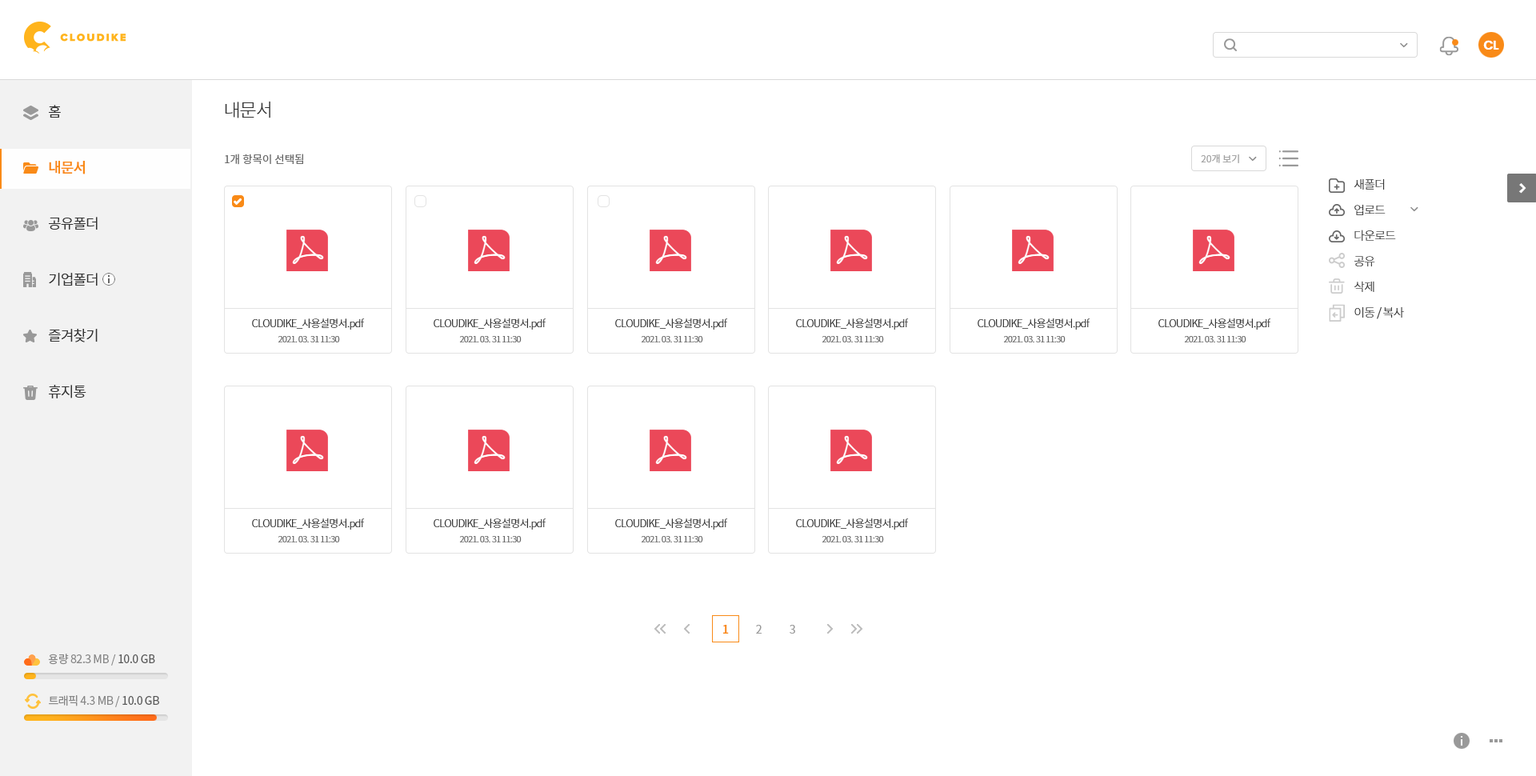
<style>
.page{position:relative;width:1536px;height:776px;background:#ffffff}
.page>*{position:absolute;margin:0}
.t1{font:12.8px "Poppins-SemiBold";letter-spacing:-0.05em;color:#ffffff}
.t2{font:18.4px "NotoSansCJKkr-Light";letter-spacing:-0.05em;color:#333333}
.t3{font:14.4px/56px "NotoSansCJKkr-DemiLight";letter-spacing:-0.05em;color:#333333}
.t4{font:14.4px/56px "NotoSansCJKkr-Medium";letter-spacing:-0.05em;color:#f98a17}
.t5{font:10.8px "NotoSansCJKkr-DemiLight";color:#666666}
.t6{font:9.6px "NotoSansCJKkr-DemiLight";color:#a1a1a1}
.t7{font:12px/25.6px "NotoSansCJKkr-Light";letter-spacing:-0.05em;color:#333333}
.t8{font:10.4px "NotoSansCJKkr-Light";letter-spacing:-0.05em;color:#333333}
.t9{font:8.8px "NotoSansCJKkr-Light";letter-spacing:-0.05em;color:#666666}
.t10{font:11.2px "NotoSansCJKkr-Medium";color:#f98a17}
.t11{font:11.2px "NotoSansCJKkr-DemiLight";color:#999999}
.t12{font:11.2px "NotoSansCJKkr-Regular";letter-spacing:-0.025em;color:#888888}
.t13{font:11.2px "NotoSansCJKkr-Regular";letter-spacing:-0.025em;color:#585858}
</style>
<div class="page">
<p class="t1" style="left:1484px;top:40px;width:16px;height:10px">CL</p>
<p class="t2" style="left:225px;top:101px;width:45px;height:17px">내문서</p>
<p class="t3" style="left:49px;top:105px;width:49px;height:293px">홈<br><span class="t4">내문서<br></span>공유폴더<br>기업폴더<br>즐겨찾기<br>휴지통</p>
<p class="t5" style="left:225px;top:154px;width:78px;height:11px">1개 항목이 선택됨</p>
<p class="t6" style="left:1201px;top:154px;width:38px;height:9px">20개 보기</p>
<p class="t7" style="left:1354px;top:178px;width:50px;height:141px">새폴더<br>업로드<br>다운로드<br>공유<br>삭제<br>이동 / 복사</p>
<p class="t8" style="left:252px;top:318px;width:113px;height:12px">CLOUDIKE_사용설명서.pdf</p>
<p class="t8" style="left:434px;top:318px;width:113px;height:12px">CLOUDIKE_사용설명서.pdf</p>
<p class="t8" style="left:615px;top:318px;width:113px;height:12px">CLOUDIKE_사용설명서.pdf</p>
<p class="t8" style="left:796px;top:318px;width:113px;height:12px">CLOUDIKE_사용설명서.pdf</p>
<p class="t8" style="left:978px;top:318px;width:113px;height:12px">CLOUDIKE_사용설명서.pdf</p>
<p class="t8" style="left:1159px;top:318px;width:112px;height:12px">CLOUDIKE_사용설명서.pdf</p>
<p class="t9" style="left:278px;top:336px;width:62px;height:6px">2021. 03. 31 11:30</p>
<p class="t9" style="left:459px;top:336px;width:63px;height:6px">2021. 03. 31 11:30</p>
<p class="t9" style="left:641px;top:336px;width:62px;height:6px">2021. 03. 31 11:30</p>
<p class="t9" style="left:822px;top:336px;width:62px;height:6px">2021. 03. 31 11:30</p>
<p class="t9" style="left:1003px;top:336px;width:63px;height:6px">2021. 03. 31 11:30</p>
<p class="t9" style="left:1184px;top:336px;width:63px;height:6px">2021. 03. 31 11:30</p>
<p class="t8" style="left:252px;top:519px;width:113px;height:11px">CLOUDIKE_사용설명서.pdf</p>
<p class="t8" style="left:434px;top:519px;width:113px;height:11px">CLOUDIKE_사용설명서.pdf</p>
<p class="t8" style="left:615px;top:519px;width:113px;height:11px">CLOUDIKE_사용설명서.pdf</p>
<p class="t8" style="left:796px;top:519px;width:113px;height:11px">CLOUDIKE_사용설명서.pdf</p>
<p class="t9" style="left:278px;top:536px;width:62px;height:7px">2021. 03. 31 11:30</p>
<p class="t9" style="left:459px;top:536px;width:63px;height:7px">2021. 03. 31 11:30</p>
<p class="t9" style="left:641px;top:536px;width:62px;height:7px">2021. 03. 31 11:30</p>
<p class="t9" style="left:822px;top:536px;width:62px;height:7px">2021. 03. 31 11:30</p>
<p class="t10" style="left:723px;top:625px;width:6px;height:9px">1</p>
<p class="t11" style="left:756px;top:625px;width:6px;height:9px">2</p>
<p class="t11" style="left:790px;top:625px;width:5px;height:9px">3</p>
<p class="t12" style="left:48px;top:654px;width:107px;height:12px">용량 82.3 MB / <span class="t13">10.0 GB</span></p>
<p class="t12" style="left:49px;top:695px;width:110px;height:12px">트래픽 4.3 MB / <span class="t13">10.0 GB</span></p>
</div>
